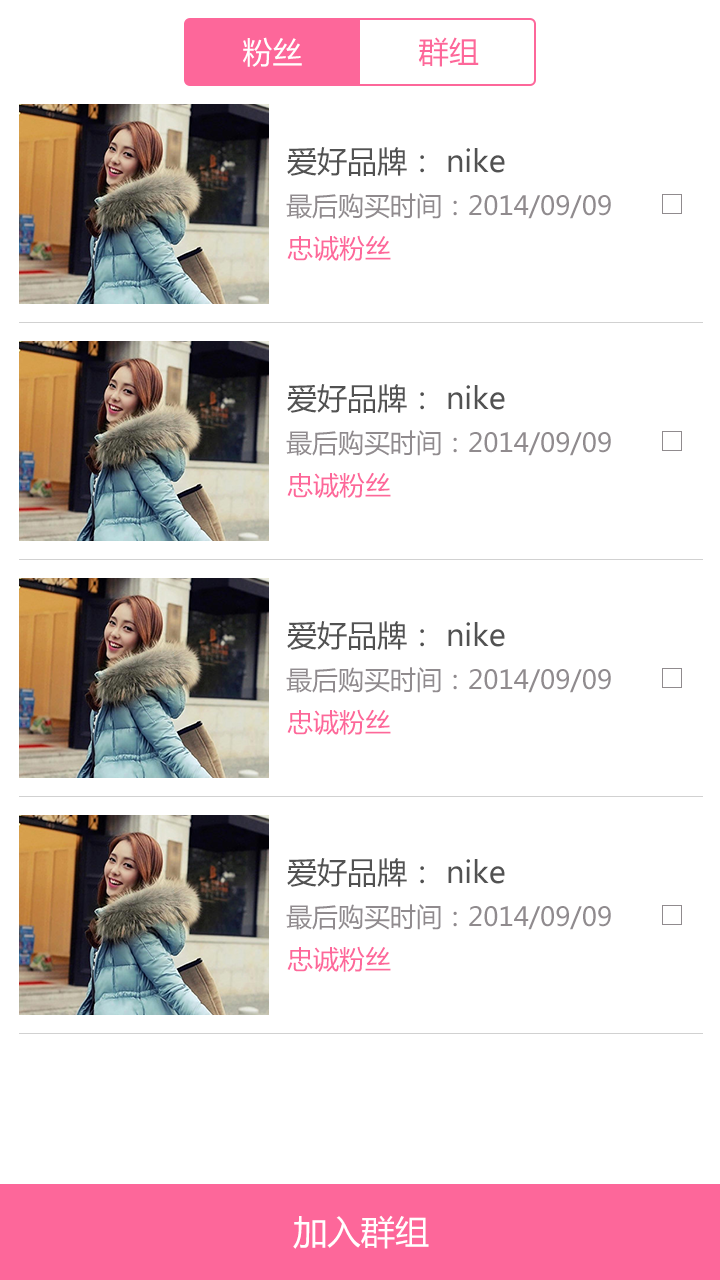
<style>
.page{position:relative;width:720px;height:1280px;background:#ffffff}
.page>*{position:absolute;margin:0}
.t1{font:30px "MicrosoftYaHei";color:#ffffff}
.t2{font:30px "MicrosoftYaHei";color:#fd679a}
.t3{font:30px "MicrosoftYaHei";color:#525252}
.t4{font:26px "MicrosoftYaHei";color:#908b8e}
.t5{font:26px "MicrosoftYaHei";color:#fd679a}
.t6{font:34px "MicrosoftYaHei";color:#ffffff}
</style>
<div class="page">
<p class="t1" style="left:243px;top:37px;width:59px;height:30px">粉丝</p>
<p class="t2" style="left:418px;top:37px;width:61px;height:30px">群组</p>
<p class="t3" style="left:287px;top:147px;width:218px;height:29px">爱好品牌： nike</p>
<p class="t4" style="left:286px;top:193px;width:325px;height:26px">最后购买时间：2014/09/09</p>
<p class="t5" style="left:287px;top:235px;width:104px;height:26px">忠诚粉丝</p>
<p class="t3" style="left:287px;top:384px;width:218px;height:29px">爱好品牌： nike</p>
<p class="t4" style="left:286px;top:430px;width:325px;height:26px">最后购买时间：2014/09/09</p>
<p class="t5" style="left:287px;top:472px;width:104px;height:26px">忠诚粉丝</p>
<p class="t3" style="left:287px;top:621px;width:218px;height:29px">爱好品牌： nike</p>
<p class="t4" style="left:286px;top:667px;width:325px;height:26px">最后购买时间：2014/09/09</p>
<p class="t5" style="left:287px;top:709px;width:104px;height:26px">忠诚粉丝</p>
<p class="t3" style="left:287px;top:858px;width:218px;height:29px">爱好品牌： nike</p>
<p class="t4" style="left:286px;top:904px;width:325px;height:26px">最后购买时间：2014/09/09</p>
<p class="t5" style="left:287px;top:946px;width:104px;height:26px">忠诚粉丝</p>
<p class="t6" style="left:293px;top:1215px;width:136px;height:34px">加入群组</p>
</div>
